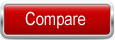
<style>
.page{position:relative;width:115px;height:40px}
.page>*{position:absolute;margin:0}
.t1{font:18px "ArialNarrowSpecialG1";color:#ffffff}
</style>
<div class="page">
<p class="t1" style="left:25px;top:11px;width:61px;height:18px">Compare</p>
</div>
